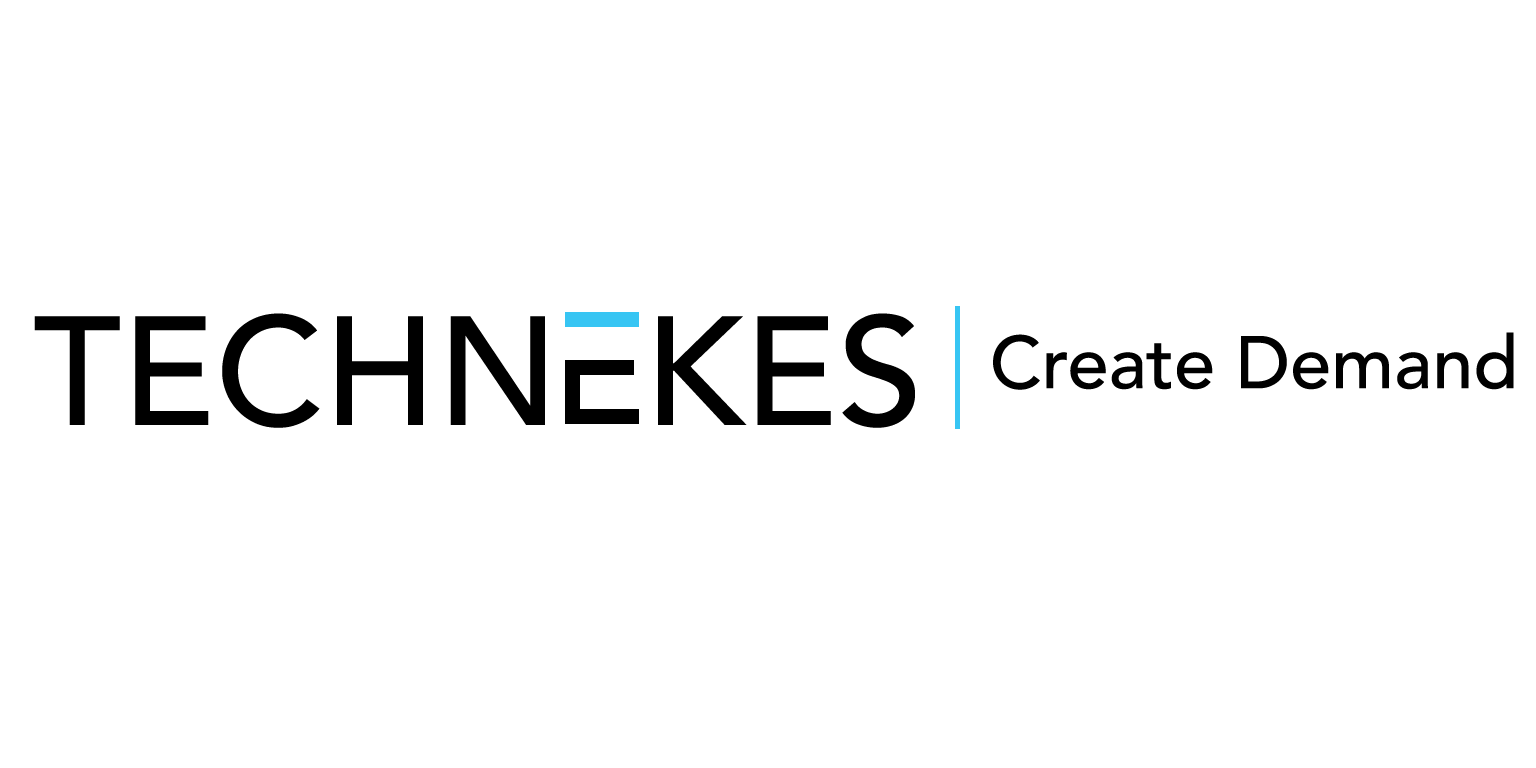
<style>
.page{position:relative;width:1536px;height:768px;background:#ffffff}
.page>*{position:absolute;margin:0}
.t1{font:153.3px "Avenir-Medium";color:#000000}
.t2{font:73.7px "Avenir-Medium";color:#000000}
</style>
<div class="page">
<p class="t1" style="left:34px;top:313px;width:881px;height:115px">TECHN  KES</p>
<p class="t2" style="left:993px;top:332px;width:521px;height:58px">Create Demand</p>
</div>
